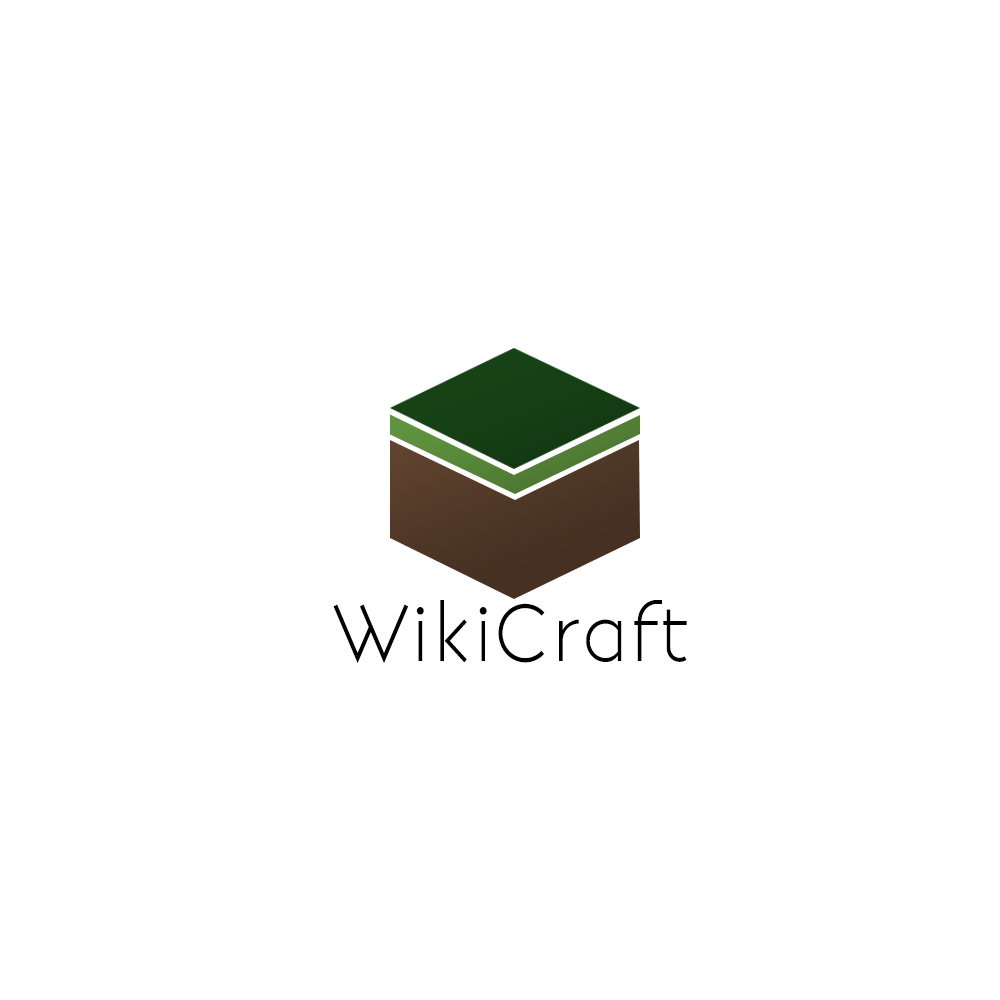
<style>
.page{position:relative;width:1000px;height:1000px;background:#ffffff}
.page>*{position:absolute;margin:0}
.t1{font:76.2px "BonvenoCF-Light";color:#000000;scale:0.91 1}
</style>
<div class="page">
<p class="t1" style="left:333px;top:600px;width:354px;height:63px">WikiCraft</p>
</div>
